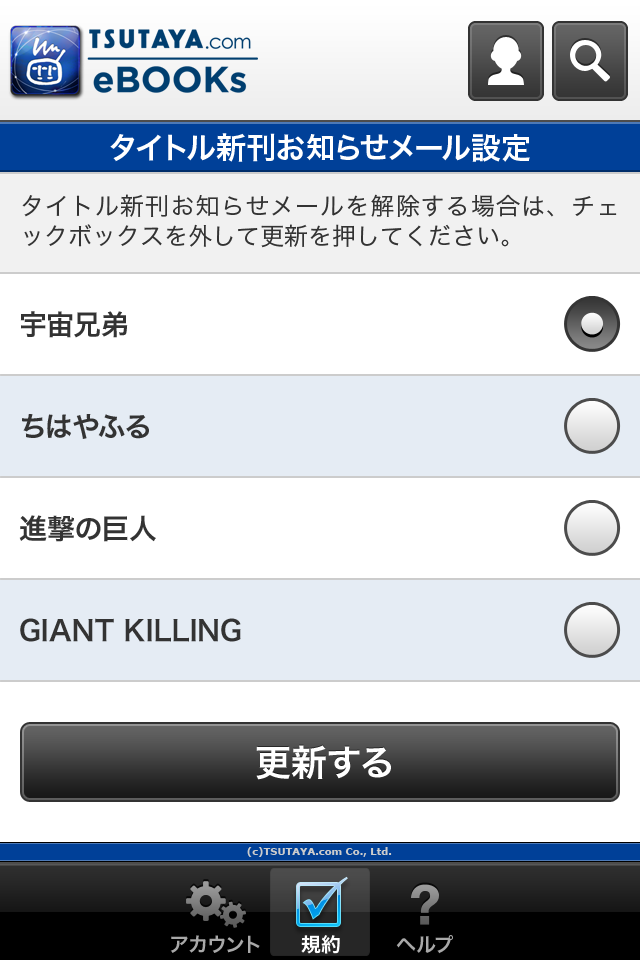
<style>
.page{position:relative;width:640px;height:960px;background:#ffffff}
.page>*{position:absolute;margin:0}
.t1{font:30px "HiraKakuPro-W6";color:#ffffff}
.t2{font:24px/30px "HiraKakuPro-W3";color:#333333}
.t3{font:28px "HiraKakuPro-W6";color:#333333}
.t4{font:36px "HiraKakuPro-W6";color:#ffffff}
.t5{font:10px "Verdana-Bold";color:#cccccc}
.t6{font:20px "HiraKakuPro-W6";color:#a8a8a8}
.t7{font:20px "HiraKakuPro-W6";color:#ffffff}
</style>
<div class="page">
<p class="t1" style="left:110px;top:133px;width:420px;height:29px">タイトル新刊お知らせメール設定</p>
<p class="t2" style="left:22px;top:194px;width:595px;height:54px;text-align:justify">タイトル新刊お知らせメールを解除する場合は、チェックボックスを外して更新を押してください。</p>
<p class="t3" style="left:20px;top:311px;width:108px;height:27px">宇宙兄弟</p>
<p class="t3" style="left:22px;top:414px;width:127px;height:25px">ちはやふる</p>
<p class="t3" style="left:19px;top:515px;width:137px;height:27px">進撃の巨人</p>
<p class="t3" style="left:20px;top:618px;width:221px;height:24px">GIANT KILLING</p>
<p class="t4" style="left:256px;top:745px;width:135px;height:35px">更新する</p>
<p class="t5" style="left:247px;top:847px;width:145px;height:10px">(c)TSUTAYA.com Co., Ltd.</p>
<p class="t6" style="left:170px;top:935px;width:90px;height:18px">アカウント</p>
<p class="t7" style="left:301px;top:935px;width:39px;height:19px">規約</p>
<p class="t6" style="left:396px;top:935px;width:57px;height:19px">ヘルプ</p>
</div>
